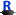
<style>
.page{position:relative;width:16px;height:15px;background:#ffffff}
.page>*{position:absolute;margin:0}
.t1{font:14px "MyriadPro-Bold";color:#0d39c8}
</style>
<div class="page">
<p class="t1" style="left:3px;top:0px;width:8px;height:11px">R</p>
</div>
